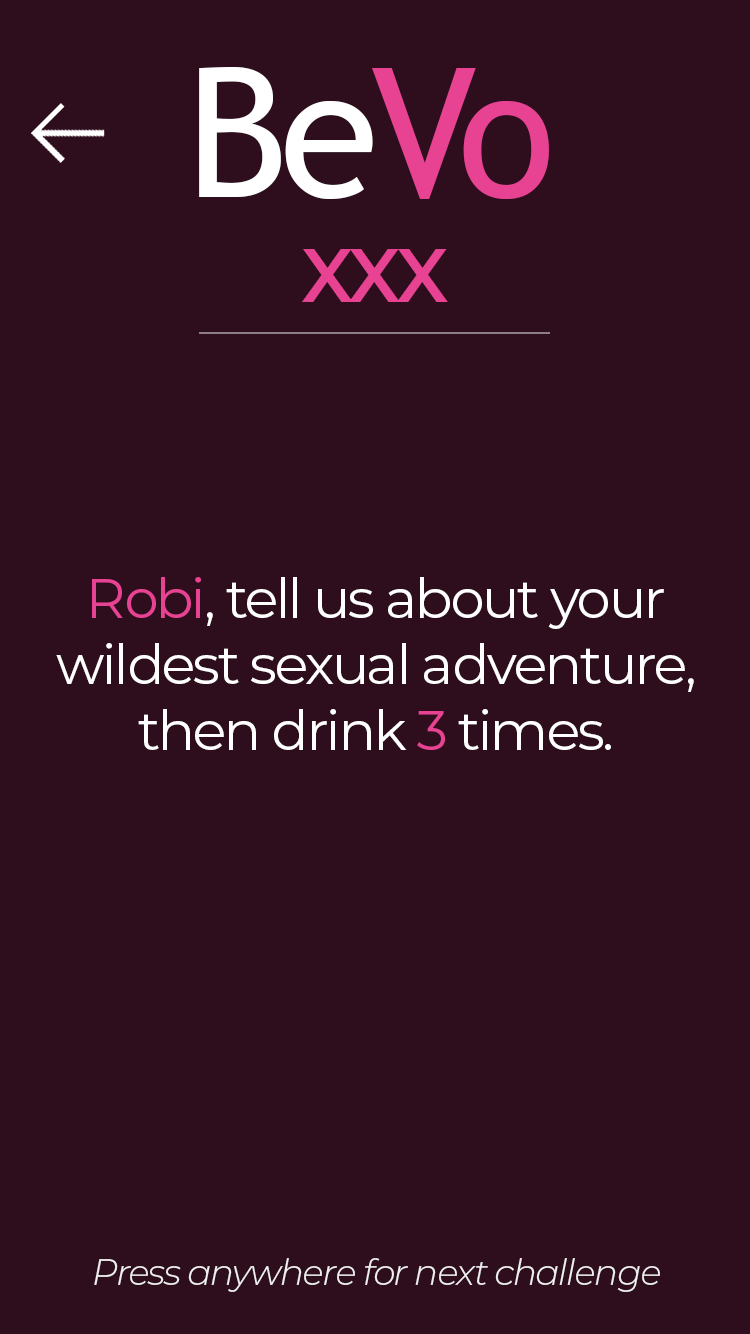
<style>
.page{position:relative;width:750px;height:1334px;background:#2e0d1d}
.page>*{position:absolute;margin:0}
.t1{font:180px "TrebuchetMS";letter-spacing:-0.04em;color:#ffffff}
.t2{font:180px "TrebuchetMS";letter-spacing:-0.04em;color:#e84393}
.t3{font:75px "Montserrat-SemiBold";letter-spacing:-0.04em;color:#e84393}
.t4{font:55px "Montserrat-Regular";letter-spacing:-0.04em;color:#ffffff}
.t5{font:55px "Montserrat-Regular";letter-spacing:-0.04em;color:#e84393}
.t6{font:36px "Montserrat-LightItalic";letter-spacing:-0.04em;color:#f0f0f0}
</style>
<div class="page">
<p class="t1" style="left:199px;top:67px;width:350px;height:132px">Be<span class="t2">Vo</span></p>
<p class="t3" style="left:302px;top:249px;width:146px;height:53px">XXX</p>
<p class="t4" style="left:56px;top:577px;width:638px;height:173px;text-align:center"><span class="t5">Robi</span>, tell us about your<br>wildest sexual adventure,<br>then drink <span class="t5">3 </span>times.</p>
<p class="t6" style="left:94px;top:1258px;width:566px;height:34px">Press anywhere for next challenge</p>
</div>
